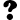
<style>
.page{position:relative;width:20px;height:20px;background:#ffffff}
.page>*{position:absolute;margin:0}
.t1{font:28px "CooperBlackStd";color:#000000}
</style>
<div class="page">
<p class="t1" style="left:3px;top:0px;width:14px;height:20px">?</p>
</div>
